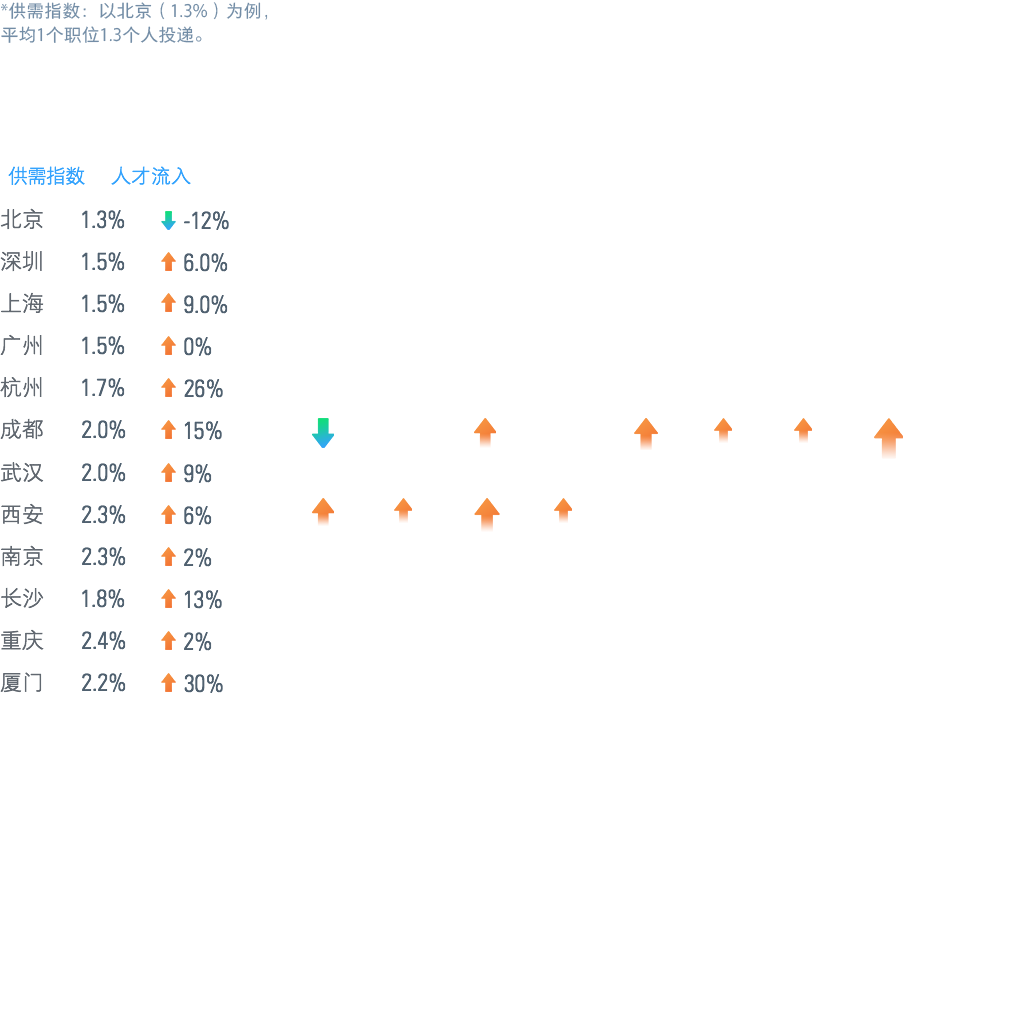
<style>
.page{position:relative;width:1024px;height:1024px;background:#ffffff}
.page>*{position:absolute;margin:0}
.t1{font:18px/23.4px "FZYOUH_508R--GB1-4";color:#738da6}
.t2{font:20px "FZYOUH_503L--GB1-4";letter-spacing:-0.05em;color:#34a3fd}
.t3{font:20px "FZYOUH_503L--GB1-4";color:#34a3fd}
.t4{font:22px "FZYOUH_503L--GB1-4";color:#616870}
.t5{font:24px "UniversLTStd-LightCn";color:#506170}
</style>
<div class="page">
<p class="t1" style="left:1px;top:2px;width:267px;height:41px">*供需指数：以北京（1.3%）为例，<br>平均1个职位1.3个人投递。</p>
<p class="t2" style="left:8px;top:166px;width:77px;height:19px">供需指数</p>
<p class="t3" style="left:111px;top:166px;width:80px;height:19px">人才流入</p>
<p class="t4" style="left:0px;top:208px;width:43px;height:22px">北京</p>
<p class="t5" style="left:82px;top:210px;width:43px;height:19px">1.3%</p>
<p class="t5" style="left:184px;top:211px;width:45px;height:19px">-12%</p>
<p class="t4" style="left:0px;top:251px;width:42px;height:21px">深圳</p>
<p class="t5" style="left:82px;top:252px;width:43px;height:19px">1.5%</p>
<p class="t5" style="left:184px;top:253px;width:44px;height:19px">6.0%</p>
<p class="t4" style="left:1px;top:292px;width:43px;height:21px">上海</p>
<p class="t5" style="left:82px;top:294px;width:43px;height:19px">1.5%</p>
<p class="t5" style="left:184px;top:295px;width:44px;height:19px">9.0%</p>
<p class="t4" style="left:0px;top:334px;width:42px;height:22px">广州</p>
<p class="t5" style="left:82px;top:336px;width:43px;height:19px">1.5%</p>
<p class="t5" style="left:184px;top:337px;width:28px;height:19px">0%</p>
<p class="t4" style="left:0px;top:377px;width:42px;height:21px">杭州</p>
<p class="t5" style="left:82px;top:378px;width:43px;height:19px">1.7%</p>
<p class="t5" style="left:184px;top:379px;width:39px;height:19px">26%</p>
<p class="t4" style="left:0px;top:418px;width:43px;height:22px">成都</p>
<p class="t5" style="left:82px;top:420px;width:44px;height:19px">2.0%</p>
<p class="t5" style="left:184px;top:421px;width:38px;height:19px">15%</p>
<p class="t4" style="left:0px;top:462px;width:44px;height:20px">武汉</p>
<p class="t5" style="left:82px;top:463px;width:44px;height:19px">2.0%</p>
<p class="t5" style="left:184px;top:464px;width:28px;height:19px">9%</p>
<p class="t4" style="left:1px;top:503px;width:42px;height:22px">西安</p>
<p class="t5" style="left:82px;top:505px;width:44px;height:19px">2.3%</p>
<p class="t5" style="left:184px;top:506px;width:28px;height:19px">6%</p>
<p class="t4" style="left:1px;top:545px;width:42px;height:22px">南京</p>
<p class="t5" style="left:82px;top:547px;width:44px;height:19px">2.3%</p>
<p class="t5" style="left:184px;top:548px;width:28px;height:19px">2%</p>
<p class="t4" style="left:1px;top:587px;width:43px;height:22px">长沙</p>
<p class="t5" style="left:82px;top:589px;width:43px;height:19px">1.8%</p>
<p class="t5" style="left:184px;top:590px;width:38px;height:19px">13%</p>
<p class="t4" style="left:1px;top:629px;width:43px;height:21px">重庆</p>
<p class="t5" style="left:82px;top:631px;width:44px;height:19px">2.4%</p>
<p class="t5" style="left:184px;top:632px;width:28px;height:19px">2%</p>
<p class="t4" style="left:0px;top:672px;width:42px;height:21px">厦门</p>
<p class="t5" style="left:82px;top:673px;width:44px;height:19px">2.2%</p>
<p class="t5" style="left:184px;top:674px;width:39px;height:19px">30%</p>
</div>
